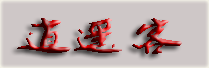
<style>
.page{position:relative;width:209px;height:68px;background:#cec7c7}
.page>*{position:absolute;margin:0}
.t1{font:35.4px "2.0-";scale:1.56 1}
</style>
<div class="page">
<p class="t1" style="left:17px;top:18px;width:165px;height:36px">逍遥客</p>
</div>
